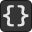
<style>
.page{position:relative;width:32px;height:32px;background:#353535}
.page>*{position:absolute;margin:0}
.t1{font:20.9px "MonaspaceNeonVar-SemiBold";color:#e5e5e5}
</style>
<div class="page">
<p class="t1" style="left:3px;top:5px;width:11px;height:22px">{</p>
<p class="t1" style="left:17px;top:5px;width:12px;height:22px">}</p>
</div>
